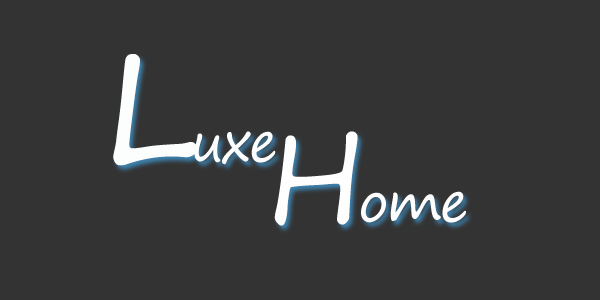
<style>
.page{position:relative;width:600px;height:300px;background:#333333}
.page>*{position:absolute;margin:0}
.t1{font:54px "SegoePrint";letter-spacing:-0.04em;color:#fcfefe}
.t2{font:150px "SegoePrint";letter-spacing:-0.04em;color:#fcfefe}
.t3{font:54px "SegoePrint";letter-spacing:-0.04em;color:#fefefe}
.t4{font:120px "SegoePrint";letter-spacing:-0.04em;color:#fefefe}
</style>
<div class="page">
<p class="t1" style="left:113px;top:54px;width:163px;height:112px"><span class="t2">L</span>uxe</p>
<p class="t3" style="left:274px;top:131px;width:192px;height:95px"><span class="t4">H</span>ome</p>
</div>
